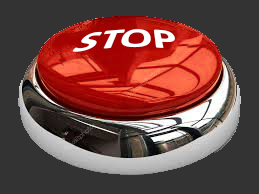
<style>
.page{position:relative;width:259px;height:194px;background:#333333}
.page>*{position:absolute;margin:0}
.t1{font:33px "Calibri-Bold";color:#ffffff;scale:1.35 1}
</style>
<div class="page">
<p class="t1" style="left:72px;top:29px;width:103px;height:23px;rotate:1deg">STOP</p>
</div>
